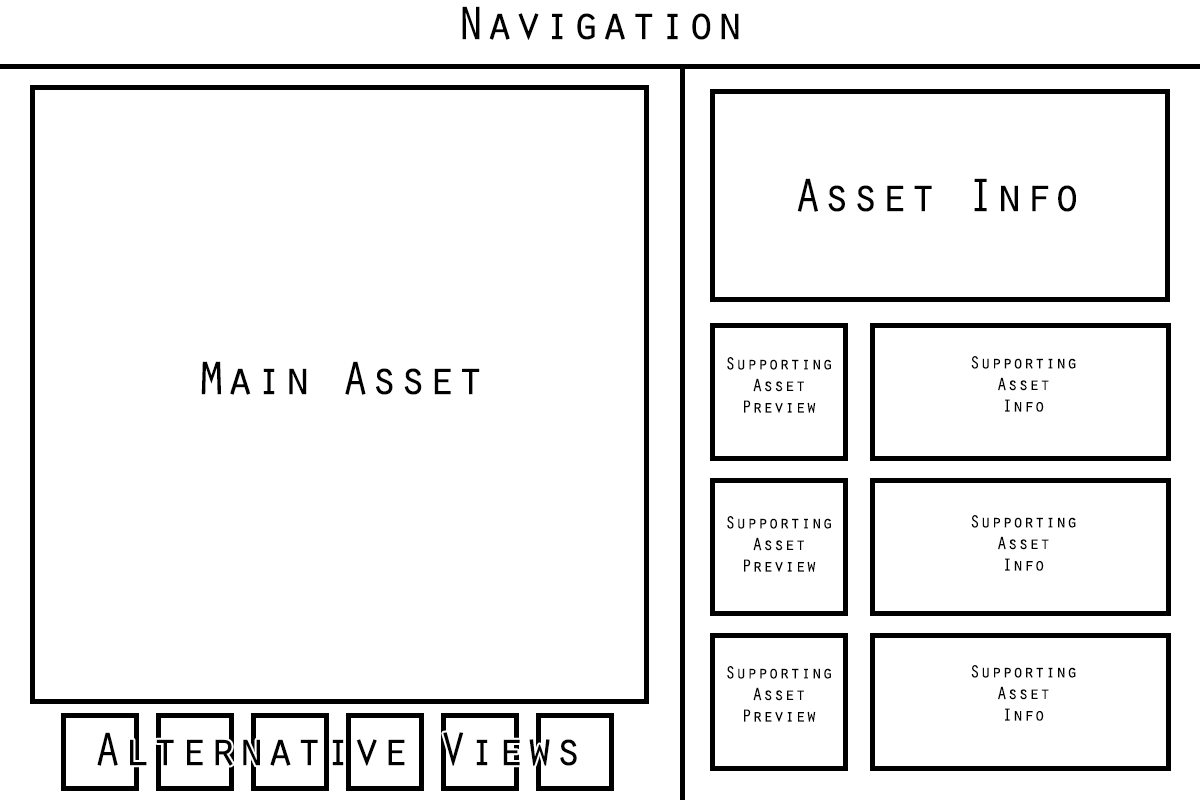
<style>
.page{position:relative;width:1200px;height:800px;background:#ffffff}
.page>*{position:absolute;margin:0}
.t1{font:48px "OratorStd";color:#000000}
.t2{font:18px "OratorStd";color:#000000}
</style>
<div class="page">
<p class="t1" style="left:462px;top:6px;width:277px;height:34px">Navigation</p>
<p class="t1" style="left:797px;top:178px;width:279px;height:34px">Asset Info</p>
<p class="t1" style="left:201px;top:361px;width:279px;height:34px">Main Asset</p>
<p class="t2" style="left:727px;top:357px;width:104px;height:56px;text-align:center">Supporting <br>Asset<br>Preview</p>
<p class="t2" style="left:971px;top:356px;width:105px;height:56px;text-align:center">Supporting <br>Asset<br>Info</p>
<p class="t2" style="left:727px;top:516px;width:104px;height:56px;text-align:center">Supporting <br>Asset<br>Preview</p>
<p class="t2" style="left:971px;top:515px;width:105px;height:56px;text-align:center">Supporting <br>Asset<br>Info</p>
<p class="t2" style="left:971px;top:665px;width:105px;height:56px;text-align:center">Supporting <br>Asset<br>Info</p>
<p class="t2" style="left:727px;top:666px;width:104px;height:56px;text-align:center">Supporting <br>Asset<br>Preview</p>
<p class="t1" style="left:97px;top:732px;width:480px;height:34px">Alternative Views</p>
</div>
